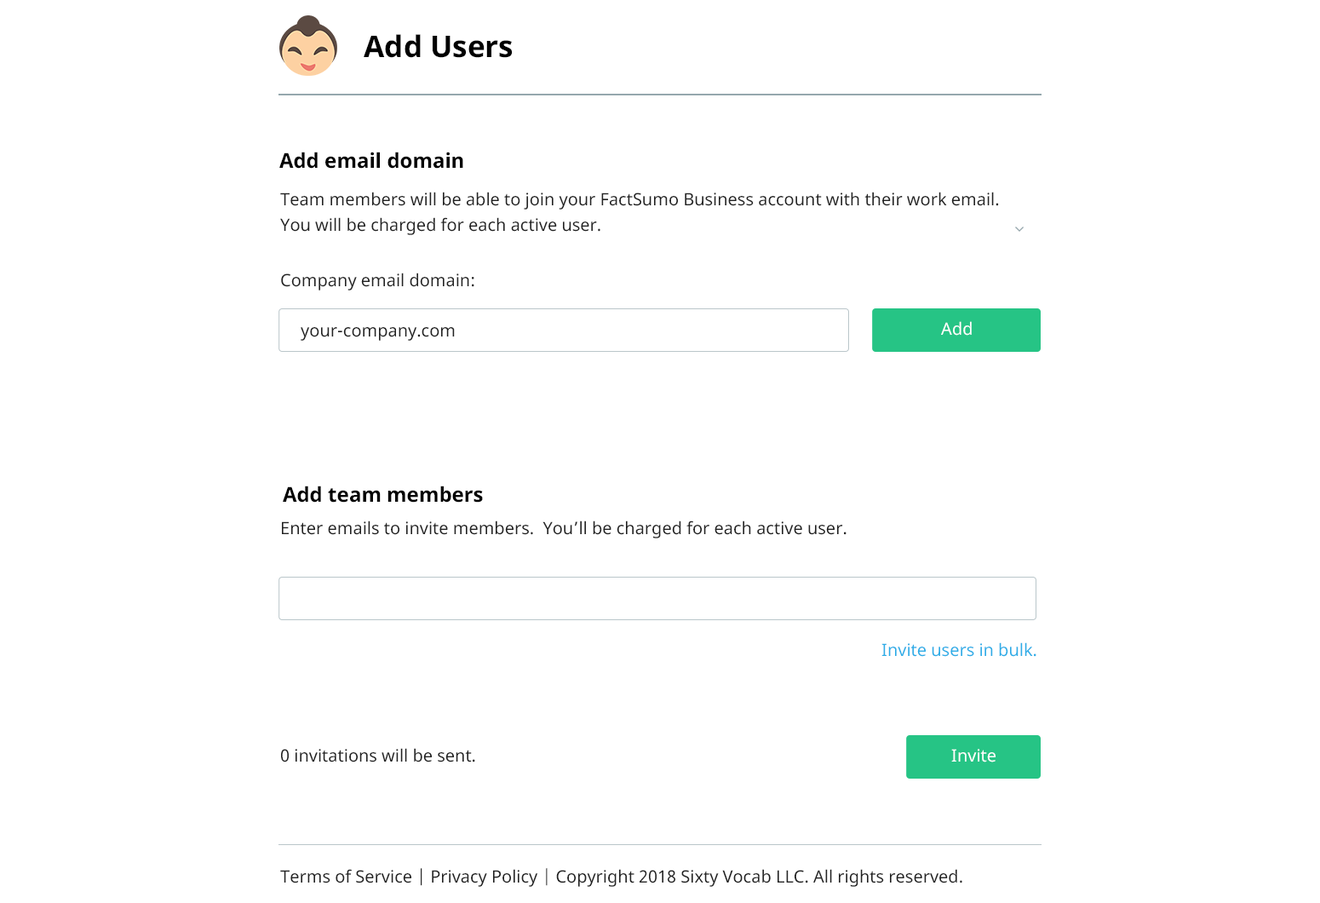
<style>
.page{position:relative;width:1320px;height:903px;background:#ffffff}
.page>*{position:absolute;margin:0}
.t1{font:29.8px "NotoSans-Bold";color:#000000}
.t2{font:20.4px "NotoSans-Bold";color:#000000}
.t3{font:17px/25.6px "NotoSans";color:#222222}
.t4{font:17px "NotoSans";color:#222222}
.t5{font:17px "NotoSans";color:#ffffff}
.t6{font:17px "NotoSans";color:#2cade7}
</style>
<div class="page">
<p class="t1" style="left:364px;top:34px;width:149px;height:24px">Add Users</p>
<p class="t2" style="left:279px;top:152px;width:184px;height:17px">Add email domain</p>
<p class="t3" style="left:280px;top:192px;width:719px;height:43px">Team members will be able to join your FactSumo Business account with their work email. <br>You will be charged for each active user.</p>
<p class="t4" style="left:281px;top:273px;width:194px;height:18px">Company email domain:</p>
<p class="t4" style="left:301px;top:327px;width:154px;height:14px">your-company.com</p>
<p class="t5" style="left:941px;top:321px;width:31px;height:15px">Add</p>
<p class="t2" style="left:283px;top:486px;width:200px;height:17px">Add team members</p>
<p class="t4" style="left:282px;top:521px;width:565px;height:17px">Enter emails to invite members.  You’ll be charged for each active user.</p>
<p class="t6" style="left:882px;top:642px;width:155px;height:15px">Invite users in bulk.</p>
<p class="t4" style="left:281px;top:748px;width:194px;height:14px">0 invitations will be sent.</p>
<p class="t5" style="left:952px;top:749px;width:44px;height:13px">Invite</p>
<p class="t4" style="left:280px;top:868px;width:683px;height:19px">Terms of Service | Privacy Policy | Copyright 2018 Sixty Vocab LLC. All rights reserved.</p>
</div>
